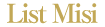
<style>
.page{position:relative;width:105px;height:27px;background:#ffffff}
.page>*{position:absolute;margin:0}
.t1{font:26px "RyuminPro-ExBold";letter-spacing:-0.08em;color:#c2a856}
</style>
<div class="page">
<p class="t1" style="left:7px;top:3px;width:91px;height:21px">List Misi</p>
</div>
